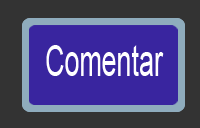
<style>
.page{position:relative;width:200px;height:128px;background:#333333}
.page>*{position:absolute;margin:0}
.t1{font:43.2px "ArialMT";color:#ffffff;scale:0.62 1}
</style>
<div class="page">
<p class="t1" style="left:46px;top:45px;width:118px;height:31px">Comentar</p>
</div>
